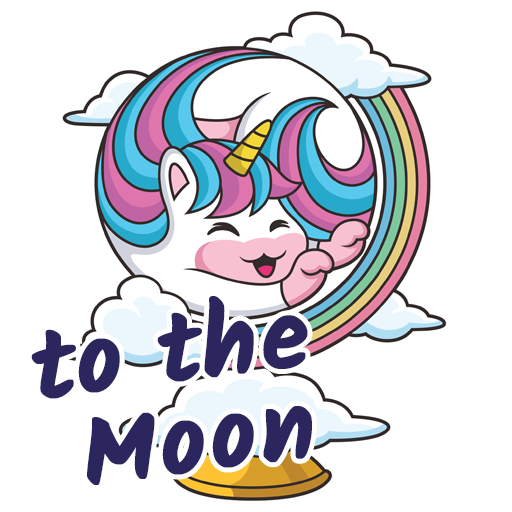
<style>
.page{position:relative;width:512px;height:512px;background:#ffffff}
.page>*{position:absolute;margin:0}
.t1{font:100px/91.7px "Kalam-Bold";letter-spacing:0.025em;color:#2c265e;font-weight:bold}
</style>
<div class="page">
<p class="t1" style="left:31px;top:296px;width:281px;height:189px;text-align:center;rotate:-7deg">to the <br>Moon</p>
</div>
